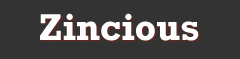
<style>
.page{position:relative;width:240px;height:59px;background:#333333}
.page>*{position:absolute;margin:0}
.t1{font:38px "Rockwell-Bold";color:#ffffff}
</style>
<div class="page">
<p class="t1" style="left:40px;top:13px;width:159px;height:28px">Zincious</p>
</div>
